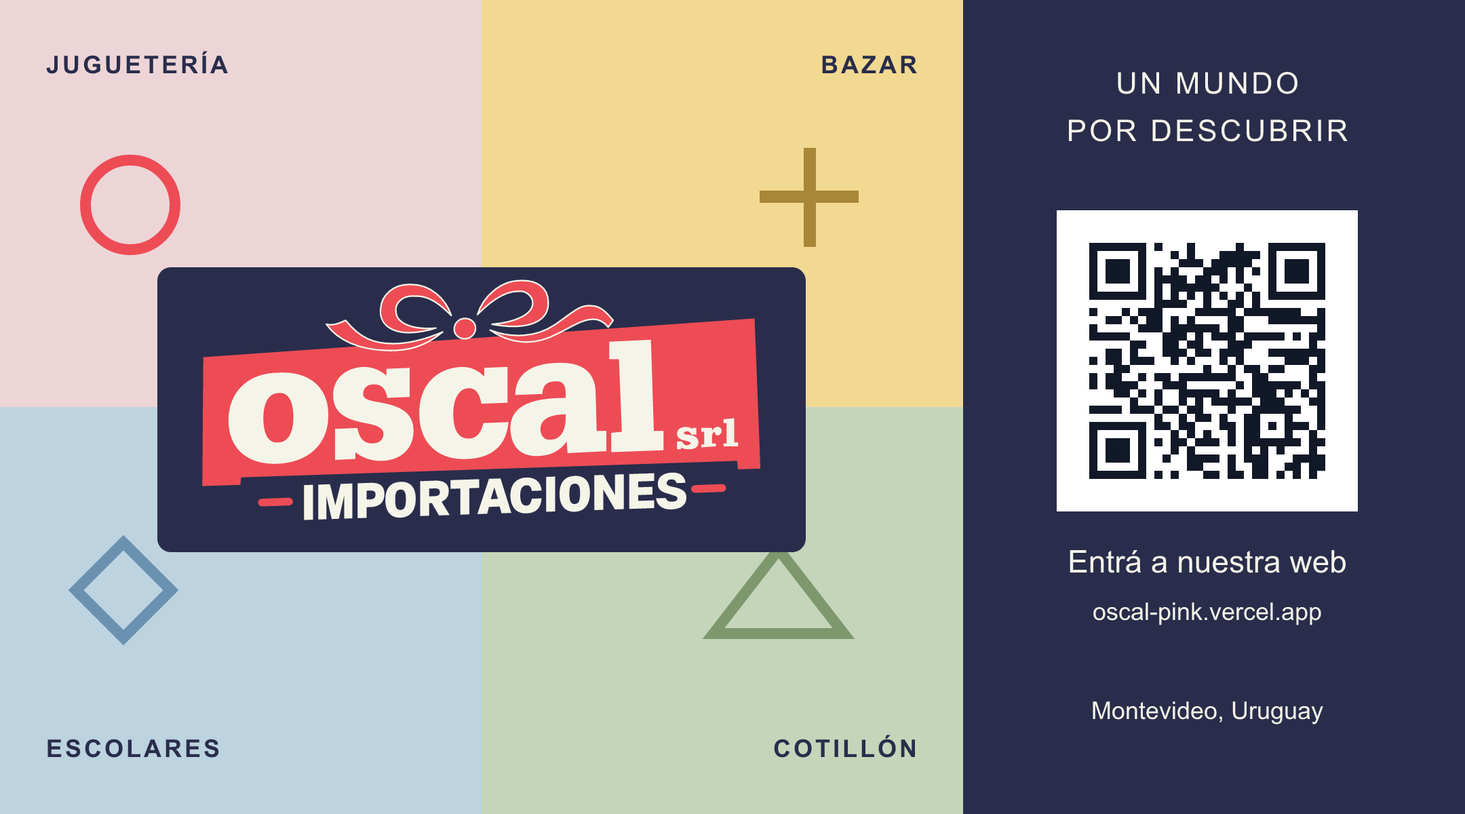
<style>
.page{position:relative;width:1465px;height:814px;background:#292d4b}
.page>*{position:absolute;margin:0}
.t1{font:24.4px "Arial-BoldMT";letter-spacing:0.111em;color:#292d4b}
.t2{font:29.8px "ArialMT";letter-spacing:0.091em;color:#f5f4e9}
.t3{font:31.2px "ArialMT";color:#f5f4e9}
.t4{font:24.4px "ArialMT";color:#f5f4e9}
</style>
<div class="page">
<p class="t1" style="left:46px;top:51px;width:182px;height:23px">JUGUETERÍA</p>
<p class="t1" style="left:822px;top:56px;width:95px;height:17px">BAZAR</p>
<p class="t2" style="left:1118px;top:72px;width:180px;height:22px">UN MUNDO</p>
<p class="t2" style="left:1069px;top:119px;width:279px;height:23px">POR DESCUBRIR</p>
<p class="t3" style="left:1070px;top:550px;width:276px;height:23px">Entrá a nuestra web</p>
<p class="t4" style="left:1093px;top:602px;width:228px;height:23px">oscal-pink.vercel.app</p>
<p class="t4" style="left:1093px;top:701px;width:230px;height:23px">Montevideo, Uruguay</p>
<p class="t1" style="left:774px;top:735px;width:141px;height:23px">COTILLÓN</p>
<p class="t1" style="left:47px;top:739px;width:172px;height:19px">ESCOLARES</p>
</div>
